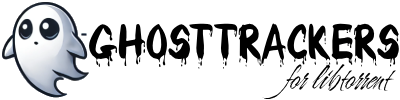
<style>
.page{position:relative;width:400px;height:100px;background:#ffffff}
.page>*{position:absolute;margin:0}
.t1{font:45px "Bloody";color:#000000}
.t2{font:35px "Cherish-Regular";color:#000000}
</style>
<div class="page">
<p class="t1" style="left:89px;top:23px;width:310px;height:46px">GhostTrackers</p>
<p class="t2" style="left:262px;top:64px;width:134px;height:36px">for libtorrent</p>
</div>
